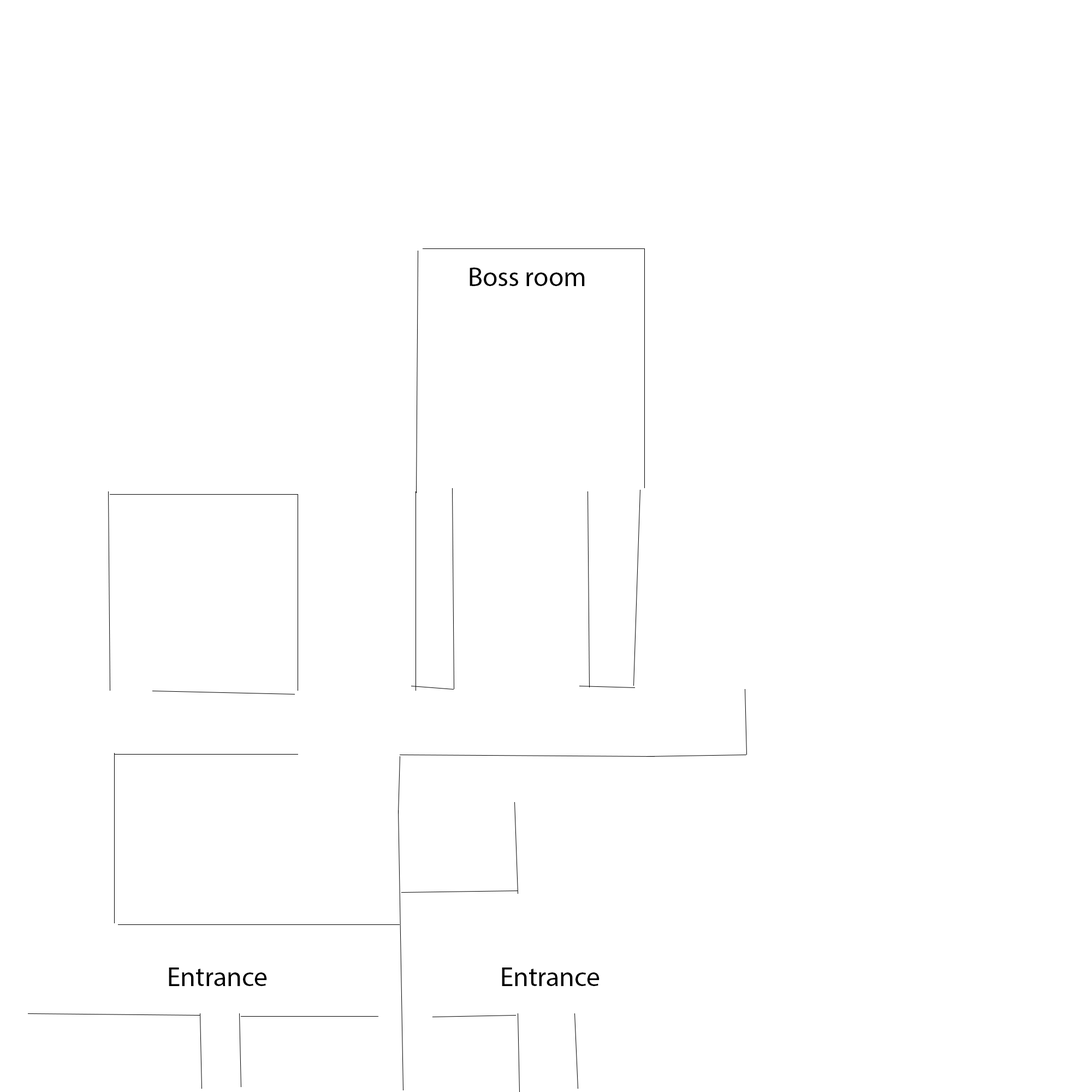
<style>
.page{position:relative;width:1092px;height:1092px;background:#ffffff}
.page>*{position:absolute;margin:0}
.t1{font:27.3px "MyriadPro-Regular";color:#000000}
</style>
<div class="page">
<p class="t1" style="left:470px;top:268px;width:115px;height:18px">Boss room</p>
<p class="t1" style="left:169px;top:967px;width:98px;height:19px">Entrance</p>
<p class="t1" style="left:502px;top:967px;width:98px;height:19px">Entrance</p>
</div>
